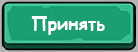
<style>
.page{position:relative;width:138px;height:52px;background:#1b9f70}
.page>*{position:absolute;margin:0}
.t1{font:18px "ComicSansMS-Bold";color:#ffffff}
</style>
<div class="page">
<p class="t1" style="left:31px;top:16px;width:74px;height:19px">Принять</p>
</div>
